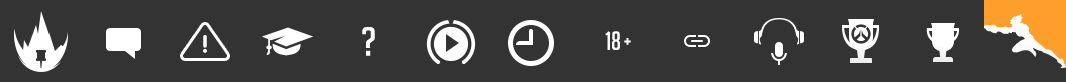
<style>
.page{position:relative;width:1066px;height:82px;background:#333333}
.page>*{position:absolute;margin:0}
.t1{font:40px "BigNoodleTitling";color:#ffffff}
.t2{font:24px "VAG-Rounded-Bold";color:#ffffff}
.t3{font:26px "BigNoodleTitling";color:#ffffff}
.t4{font:22px "BigNoodleTitling";color:#ffffff}
</style>
<div class="page">
<p class="t1" style="left:362px;top:27px;width:13px;height:29px">?</p>
<p class="t2" style="left:203px;top:35px;width:4px;height:18px">!</p>
<p class="t3" style="left:605px;top:31px;width:15px;height:19px">18</p>
<p class="t4" style="left:624px;top:38px;width:7px;height:7px">+</p>
</div>
